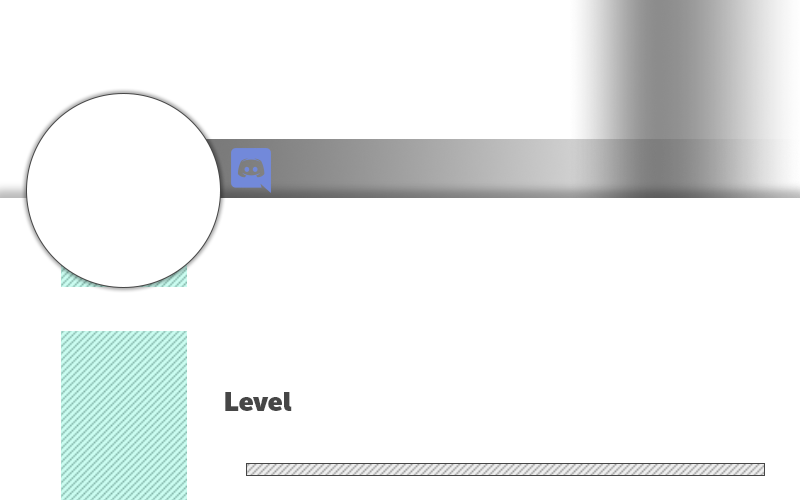
<style>
.page{position:relative;width:800px;height:500px;background:#ffffff}
.page>*{position:absolute;margin:0}
.t1{font:26.1px "MuseoSansDisplay-Black";color:#464646}
</style>
<div class="page">
<p class="t1" style="left:225px;top:392px;width:67px;height:19px">Level</p>
</div>
